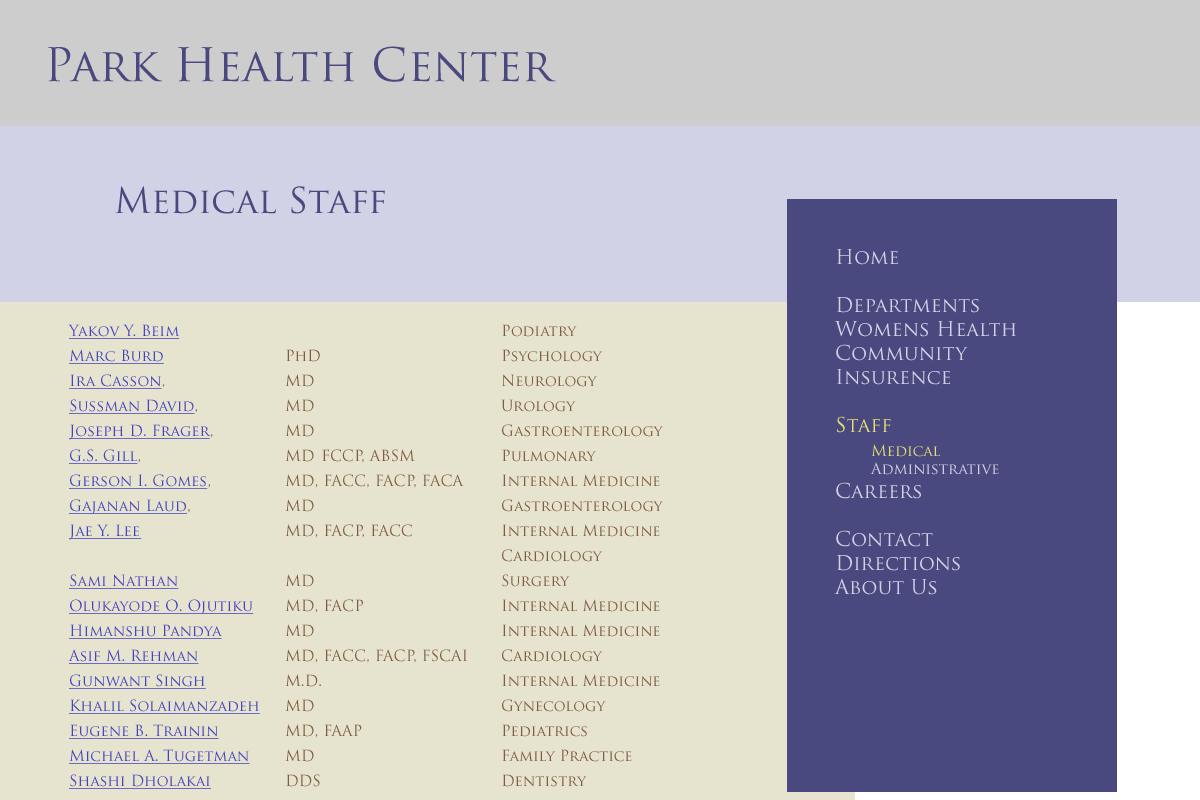
<style>
.page{position:relative;width:1200px;height:800px;background:#e6e3cf}
.page>*{position:absolute;margin:0}
.t1{font:45px "TrajanPro-Regular";color:#494980}
.t2{font:35px "TrajanPro-Regular";color:#494980}
.t3{font:20px "TrajanPro-Regular";color:#d2d2e6}
.t4{font:20px "TrajanPro-Regular";color:#e6e073}
.t5{font:15px "TrajanPro-Regular";color:#e6e073}
.t6{font:15px "TrajanPro-Regular";color:#d2d2e6}
.t7{font:15px/25px "TrajanPro-Regular";color:#805d40}
.t8{font:15px/25px "TrajanPro-Regular";color:#4444bf;text-decoration:underline}
</style>
<div class="page">
<p class="t1" style="left:48px;top:46px;width:508px;height:36px">Park Health Center</p>
<p class="t2" style="left:115px;top:186px;width:270px;height:28px">Medical Staff</p>
<p class="t3" style="left:834px;top:249px;width:182px;height:346px">Home<br><br>Departments<br>Womens Health<br>Community<br>Insurence<br><br><span class="t4">Staff<br> </span><span class="t5">Medical<br> </span><span class="t6">Administrative<br></span>Careers<br><br>Contact<br>Directions<br>About Us</p>
<p class="t7" style="left:68px;top:324px;width:595px;height:465px"><span class="t8">Yakov Y. Beim</span>         Podiatry<br><span class="t8">Marc Burd</span>     PhD      Psychology<br><span class="t8">Ira Casson</span>,     MD      Neurology<br><span class="t8">Sussman David</span>,    MD      Urology <br><span class="t8">Joseph D. Frager</span>,   MD       Gastroenterology<br><span class="t8">G.S. Gill</span>,     MD FCCP, ABSM   Pulmonary<br><span class="t8">Gerson I. Gomes</span>,   MD, FACC, FACP, FACA  Internal Medicine<br><span class="t8">Gajanan Laud</span>,   MD      Gastroenterology<br><span class="t8">Jae Y. Lee </span>    MD, FACP, FACC   Internal Medicine<br>            Cardiology<br><span class="t8">Sami Nathan</span>   MD      Surgery<br><span class="t8">Olukayode O. Ojutiku</span> MD, FACP    Internal Medicine<br><span class="t8">Himanshu Pandya</span>  MD      Internal Medicine<br><span class="t8">Asif M. Rehman</span>   MD, FACC, FACP, FSCAI Cardiology<br><span class="t8">Gunwant Singh</span>   M.D.     Internal Medicine<br><span class="t8">Khalil Solaimanzadeh</span> MD      Gynecology<br><span class="t8">Eugene B. Trainin</span>  MD, FAAP    Pediatrics<br><span class="t8">Michael A. Tugetman</span> MD      Family Practice<br><span class="t8">Shashi Dholakai</span>   DDS      Dentistry</p>
</div>
